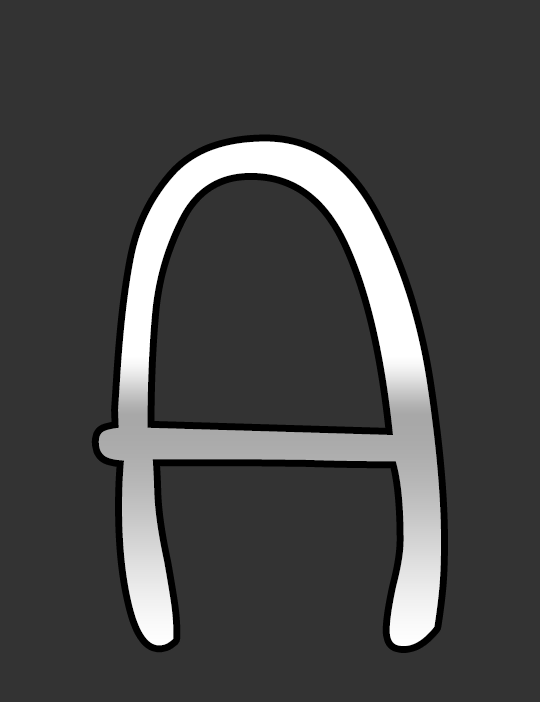
<style>
.page{position:relative;width:540px;height:702px;background:#333333}
.page>*{position:absolute;margin:0}
.t1{font:662.6px "IndieFlower-Regular"}
</style>
<div class="page">
<p class="t1" style="left:98px;top:141px;width:343px;height:505px">A</p>
</div>
